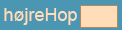
<style>
.page{position:relative;width:122px;height:30px;background:#4b96b2}
.page>*{position:absolute;margin:0}
.t1{font:18px "ArialMT";color:#ffddb8}
</style>
<div class="page">
<p class="t1" style="left:4px;top:8px;width:73px;height:17px">højreHop</p>
</div>
